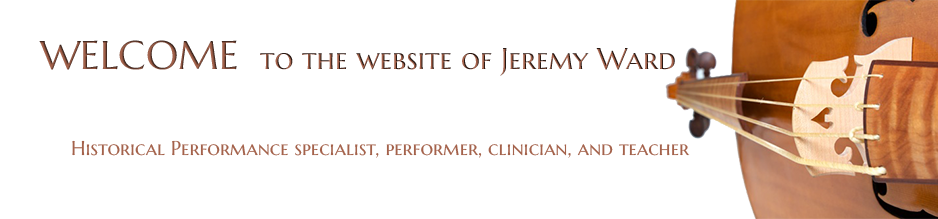
<style>
.page{position:relative;width:938px;height:219px;background:#ffffff}
.page>*{position:absolute;margin:0}
.t1{font:40px "MarcellusSC-Regular"}
.t2{font:30px "MarcellusSC-Regular"}
.t3{font:20px "MarcellusSC-Regular";color:#a4624b}
</style>
<div class="page">
<p class="t1" style="left:39px;top:40px;width:198px;height:30px">WELCOME</p>
<p class="t2" style="left:260px;top:48px;width:415px;height:28px">to the website of Jeremy Ward</p>
<p class="t3" style="left:72px;top:140px;width:618px;height:18px">Historical Performance specialist, performer, clinician, and teacher</p>
</div>
